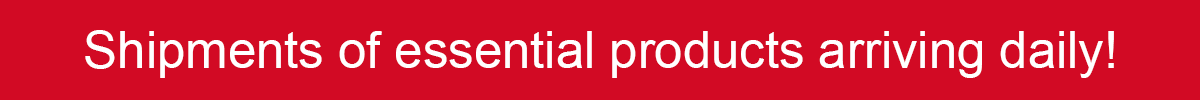
<style>
.page{position:relative;width:1200px;height:100px;background:#d20a24}
.page>*{position:absolute;margin:0}
.t1{font:50.9px "ArialMT";color:#ffffff}
</style>
<div class="page">
<p class="t1" style="left:85px;top:30px;width:1029px;height:48px">Shipments of essential products arriving daily!</p>
</div>
